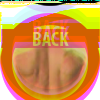
<style>
.page{position:relative;width:100px;height:100px}
.page>*{position:absolute;margin:0}
.t1{font:20.8px "MyriadPro-BoldCond"}
</style>
<div class="page">
<p class="t1" style="left:33px;top:19px;width:36px;height:14px">BACK</p>
</div>
